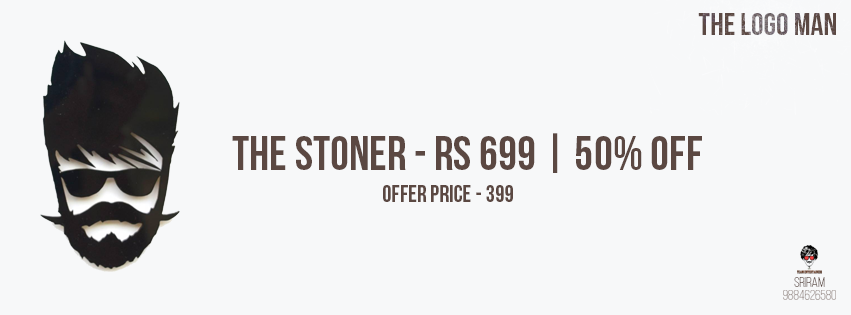
<style>
.page{position:relative;width:851px;height:315px;background:#f7f8f9}
.page>*{position:absolute;margin:0}
.t1{font:31.7px "BebasNeue"}
.t2{font:48px "BebasNeue";color:#5b4842}
.t3{font:24px "BebasNeue";color:#5b4842}
.t4{font:14px "BebasNeueLight";color:#5b4842}
</style>
<div class="page">
<p class="t1" style="left:698px;top:13px;width:138px;height:22px">the logo man</p>
<p class="t2" style="left:232px;top:133px;width:470px;height:40px">The Stoner - rs 699 | 50% Off</p>
<p class="t3" style="left:383px;top:185px;width:130px;height:17px">offer price - 399</p>
<p class="t4" style="left:794px;top:277px;width:31px;height:10px">sriram</p>
</div>
